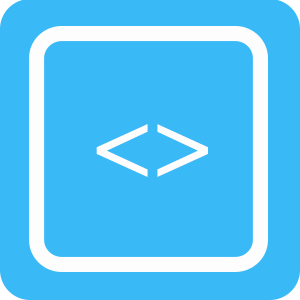
<style>
.page{position:relative;width:300px;height:300px;background:#39b9f6}
.page>*{position:absolute;margin:0}
.t1{font:100px "STHeitiSC-Light";color:#fdfdfe}
</style>
<div class="page">
<p class="t1" style="left:96px;top:124px;width:112px;height:53px">&lt;&gt;</p>
</div>
